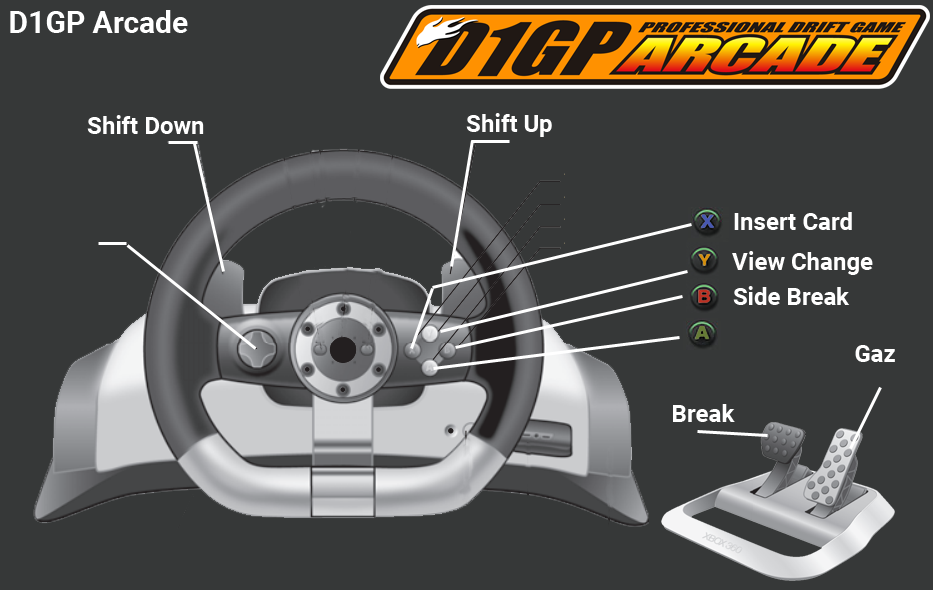
<style>
.page{position:relative;width:933px;height:590px;background:#363838}
.page>*{position:absolute;margin:0}
.t1{font:30px "Roboto-Bold";color:#ffffff}
.t2{font:24px "Roboto-Bold";color:#ffffff}
</style>
<div class="page">
<p class="t1" style="left:10px;top:10px;width:178px;height:23px">D1GP Arcade</p>
<p class="t2" style="left:466px;top:113px;width:86px;height:24px">Shift Up</p>
<p class="t2" style="left:87px;top:115px;width:117px;height:19px">Shift Down</p>
<p class="t2" style="left:734px;top:212px;width:118px;height:18px">Insert Card</p>
<p class="t2" style="left:732px;top:251px;width:141px;height:24px">View Change</p>
<p class="t2" style="left:733px;top:286px;width:117px;height:19px">Side Break</p>
<p class="t2" style="left:855px;top:345px;width:40px;height:17px">Gaz</p>
<p class="t2" style="left:673px;top:404px;width:62px;height:18px">Break</p>
</div>
